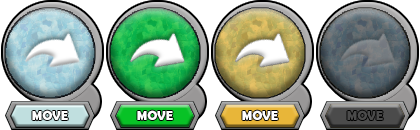
<style>
.page{position:relative;width:420px;height:130px}
.page>*{position:absolute;margin:0}
.t1{font:13px "BerlinSansFBDemi-Bold";color:#ffffff}
.t2{font:13px "BerlinSansFBDemi-Bold";color:#4b4b4b}
</style>
<div class="page">
<p class="t1" style="left:32px;top:110px;width:36px;height:11px">MOVE</p>
<p class="t1" style="left:137px;top:110px;width:36px;height:11px">MOVE</p>
<p class="t1" style="left:242px;top:110px;width:36px;height:11px">MOVE</p>
<p class="t2" style="left:347px;top:110px;width:36px;height:11px">MOVE</p>
</div>
